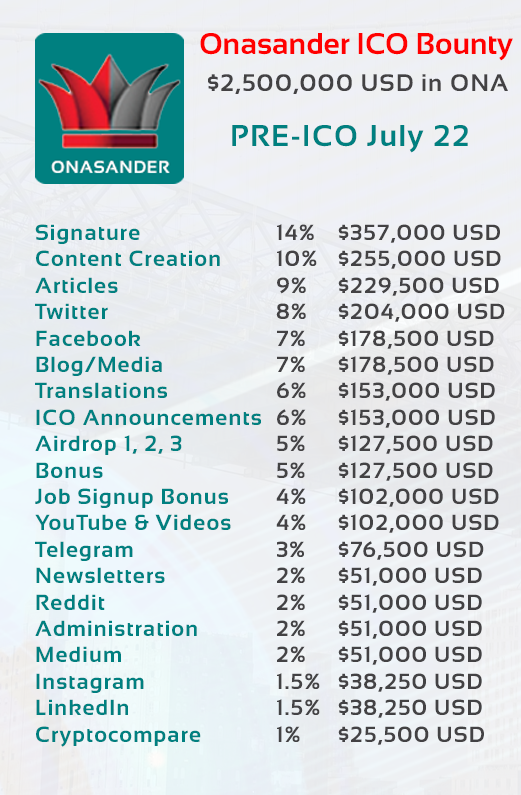
<style>
.page{position:relative;width:521px;height:795px}
.page>*{position:absolute;margin:0}
.t1{font:30px "Sansation-Bold";color:#ff0000}
.t2{font:24px "Sansation-Bold";letter-spacing:0.05em;color:#434244}
.t3{font:30px "Sansation-Bold";letter-spacing:0.05em;color:#008080}
.t4{font:22px "Sansation-Bold";letter-spacing:0.05em;color:#008080}
.t5{font:22px "Sansation-Bold";letter-spacing:0.05em;color:#434244}
</style>
<div class="page">
<p class="t1" style="left:200px;top:33px;width:313px;height:28px">Onasander ICO Bounty</p>
<p class="t2" style="left:208px;top:74px;width:300px;height:20px">$2,500,000 USD in ONA</p>
<p class="t3" style="left:232px;top:125px;width:236px;height:28px">PRE-ICO July 22</p>
<p class="t4" style="left:35px;top:224px;width:226px;height:523px">Signature<br>Content Creation<br>Articles<br>Twitter<br>Facebook<br>Blog/Media<br>Translations<br>ICO Announcements<br>Airdrop 1, 2, 3<br>Bonus<br>Job Signup Bonus<br>YouTube &amp; Videos<br>Telegram<br>Newsletters<br>Reddit<br>Administration<br>Medium<br>Instagram<br>LinkedIn<br>Cryptocompare</p>
<p class="t5" style="left:276px;top:224px;width:44px;height:518px">14%<br>10%<br>9%<br>8%<br>7%<br>7%<br>6%<br>6%<br>5%<br>5%<br>4%<br>4%<br>3%<br>2%<br>2%<br>2%<br>2%<br>1.5%<br>1.5%<br>1%</p>
<p class="t5" style="left:338px;top:224px;width:167px;height:521px">$357,000 USD<br>$255,000 USD<br>$229,500 USD<br>$204,000 USD<br>$178,500 USD<br>$178,500 USD<br>$153,000 USD<br>$153,000 USD<br>$127,500 USD<br>$127,500 USD<br>$102,000 USD<br>$102,000 USD<br>$76,500 USD<br>$51,000 USD<br>$51,000 USD<br>$51,000 USD<br>$51,000 USD<br>$38,250 USD<br>$38,250 USD<br>$25,500 USD</p>
</div>
